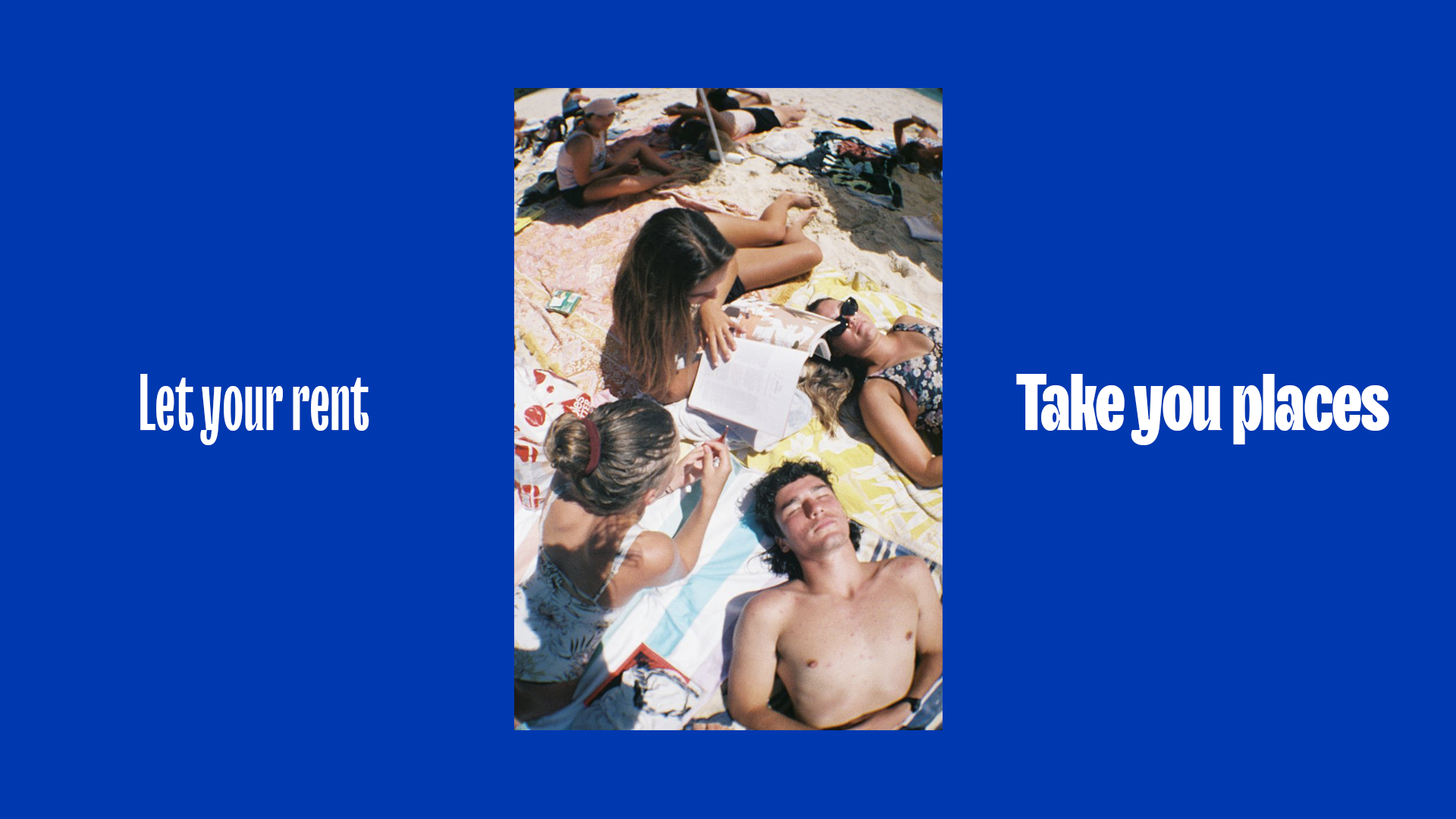
<style>
.page{position:relative;width:1456px;height:819px;background:#0038b0}
.page>*{position:absolute;margin:0}
.t1{font:80.3px "TTTrailersTrial-Db";color:#ffffff}
.t2{font:80.3px "TTTrailersTrial-Blk";letter-spacing:-0.02em;color:#ffffff}
</style>
<div class="page">
<p class="t1" style="left:140px;top:374px;width:229px;height:71px">Let your rent</p>
<p class="t2" style="left:1016px;top:374px;width:373px;height:71px">Take you places</p>
</div>
